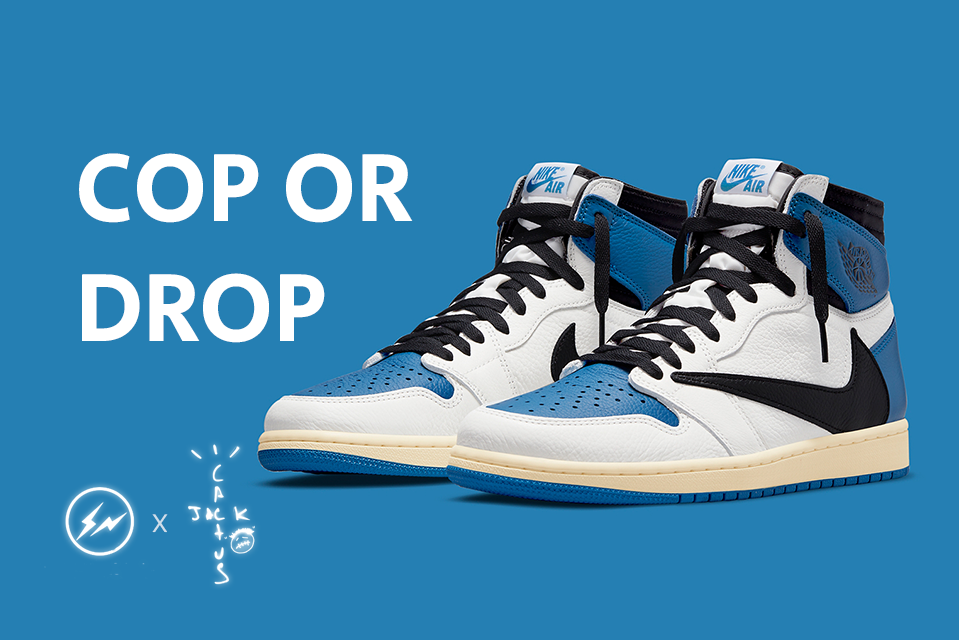
<style>
.page{position:relative;width:959px;height:640px;background:#257fb3}
.page>*{position:absolute;margin:0}
.t1{font:100px "SecularOne-Regular";color:#ffffff}
.t2{font:25px "SFProDisplay-Regular";color:#cfdeea}
</style>
<div class="page">
<p class="t1" style="left:79px;top:153px;width:334px;height:190px">COP OR DROP</p>
<p class="t2" style="left:152px;top:514px;width:16px;height:19px">X</p>
</div>
